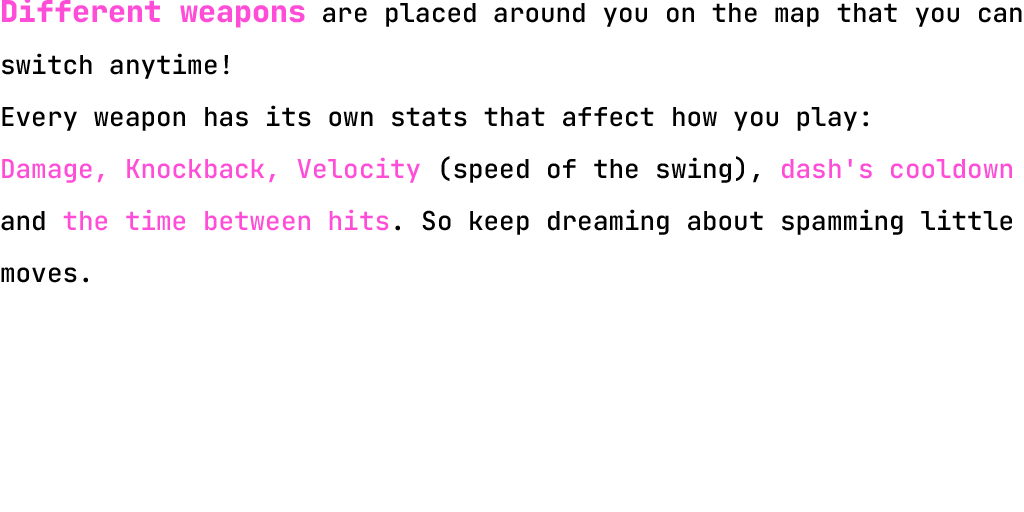
<style>
.page{position:relative;width:1024px;height:512px;background:#ffffff}
.page>*{position:absolute;margin:0}
.t1{font:26px/52px "JetBrainsMonoRoman-Medium";color:#000000}
.t2{font:30px/52px "JetBrainsMonoRoman-ExtraBold";color:#ff4dd8}
.t3{font:26px/52px "JetBrainsMonoRoman-Medium";color:#ff4dd8}
</style>
<div class="page">
<p class="t1" style="left:1px;top:0px;width:1021px;height:283px"><span class="t2">Different weapons</span> are placed around you on the map that you can switch anytime! <br>Every weapon has its own stats that affect how you play: <br><span class="t3">Damage, Knockback, Velocity</span> (speed of the swing), <span class="t3">dash's cooldown</span> and <span class="t3">the time between hits</span>. So keep dreaming about spamming little moves.</p>
</div>
